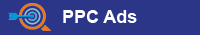
<style>
.page{position:relative;width:200px;height:35px;background:#2b3688}
.page>*{position:absolute;margin:0}
.t1{font:18px "Arial-BoldMT";color:#ffffff}
</style>
<div class="page">
<p class="t1" style="left:63px;top:10px;width:74px;height:13px">PPC Ads</p>
</div>
